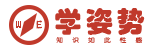
<style>
.page{position:relative;width:155px;height:50px;background:#ffffff}
.page>*{position:absolute;margin:0}
.t1{font:28.6px "STHupo";letter-spacing:0.1em;color:#c0392b}
.t2{font:9.8px "Bauhaus93";color:#c0392b;scale:0.71 1}
.t3{font:6px "YouYuan";letter-spacing:1.4em;color:#c0392b;scale:1.1 1}
</style>
<div class="page">
<p class="t1" style="left:55px;top:8px;width:90px;height:27px">学姿势</p>
<p class="t2" style="left:16px;top:21px;width:5px;height:7px">W</p>
<p class="t3" style="left:56px;top:37px;width:87px;height:6px">知识如此性感</p>
</div>
